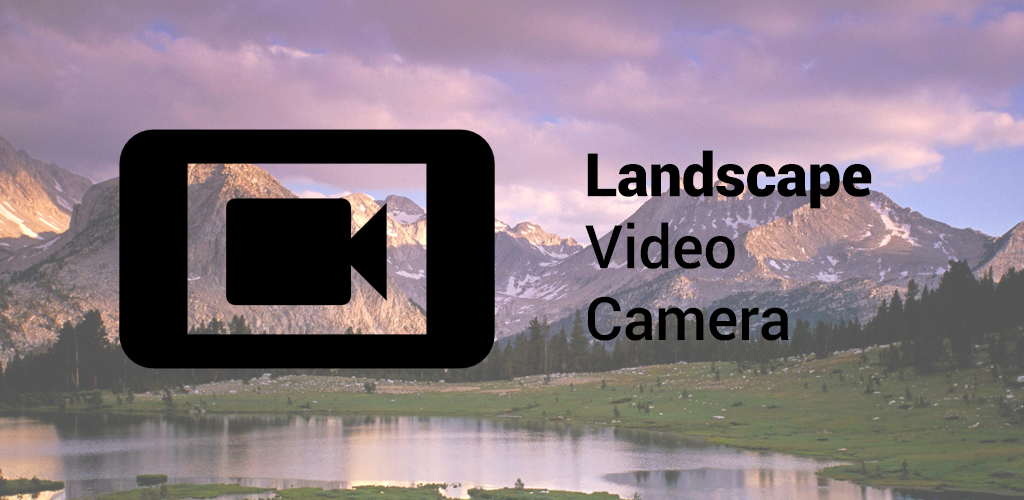
<style>
.page{position:relative;width:1024px;height:500px}
.page>*{position:absolute;margin:0}
.t1{font:60px/36px "Roboto-Medium";letter-spacing:-0.005em;color:#000000}
.t2{font:60px/36px "Roboto-Black";letter-spacing:-0.005em;color:#000000}
</style>
<div class="page">
<p class="t1" style="left:585px;top:150px;width:287px;height:191px"><span class="t2">Landscape</span> <br><br>Video <br><br>Camera</p>
</div>
